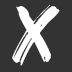
<style>
.page{position:relative;width:72px;height:72px;background:#333333}
.page>*{position:absolute;margin:0}
.t1{font:79.3px "EdoSZ";color:#ffffff}
</style>
<div class="page">
<p class="t1" style="left:12px;top:5px;width:48px;height:61px;rotate:-3deg">x</p>
</div>
